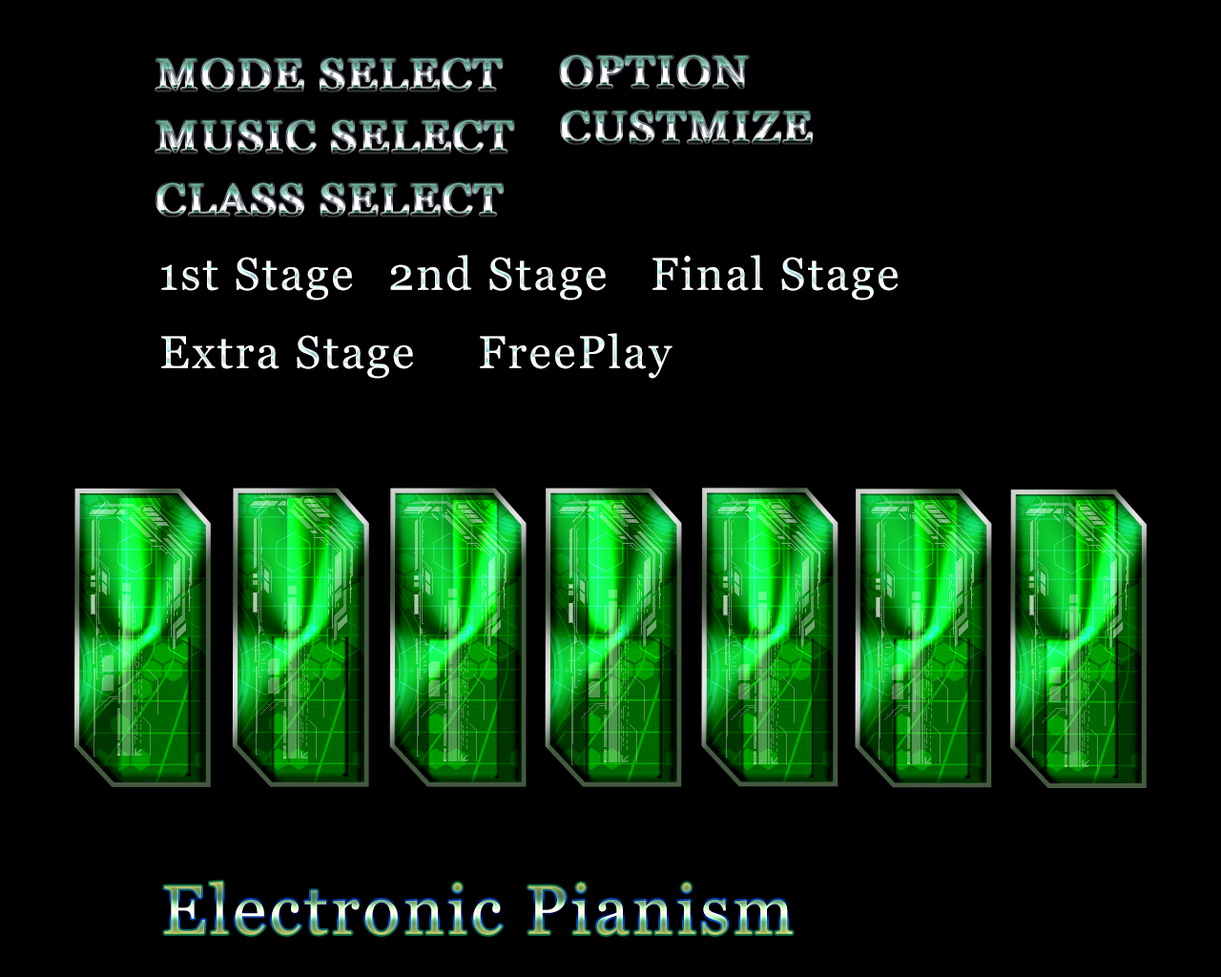
<style>
.page{position:relative;width:1221px;height:977px;background:#000000}
.page>*{position:absolute;margin:0}
.t1{font:45.8px "Vani";letter-spacing:0.05em}
.t2{font:45.8px "Vani";letter-spacing:0.05em;color:#ffffff}
.t3{font:68.7px "Vani";letter-spacing:0.05em}
</style>
<div class="page">
<p class="t1" style="left:156px;top:57px;width:346px;height:35px">MODE SELECT</p>
<p class="t1" style="left:561px;top:54px;width:187px;height:35px">OPTION</p>
<p class="t1" style="left:562px;top:110px;width:250px;height:34px">CUSTMIZE</p>
<p class="t1" style="left:156px;top:119px;width:357px;height:35px">MUSIC SELECT</p>
<p class="t1" style="left:157px;top:182px;width:345px;height:35px">CLASS SELECT</p>
<p class="t2" style="left:161px;top:257px;width:192px;height:43px">1st Stage</p>
<p class="t1" style="left:390px;top:255px;width:216px;height:45px">2nd Stage</p>
<p class="t1" style="left:652px;top:255px;width:246px;height:45px">Final Stage</p>
<p class="t2" style="left:161px;top:335px;width:252px;height:44px">Extra Stage</p>
<p class="t1" style="left:480px;top:333px;width:192px;height:46px">FreePlay</p>
<p class="t3" style="left:164px;top:881px;width:629px;height:54px">Electronic Pianism</p>
</div>
